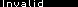
<style>
.page{position:relative;width:78px;height:7px;background:#000000}
.page>*{position:absolute;margin:0}
.t1{font:8px "PixelOperator8";color:#ffffff}
</style>
<div class="page">
<p class="t1" style="left:2px;top:0px;width:41px;height:7px">Invalid</p>
</div>
